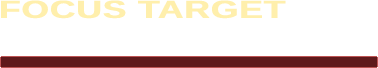
<style>
.page{position:relative;width:378px;height:68px;background:#ffffff}
.page>*{position:absolute;margin:0}
.t1{font:25.2px "Arimo-Bold";color:#ffefac;font-weight:bold;scale:1.4 1}
</style>
<div class="page">
<p class="t1" style="left:0px;top:0px;width:286px;height:19px">FOCUS TARGET</p>
</div>
